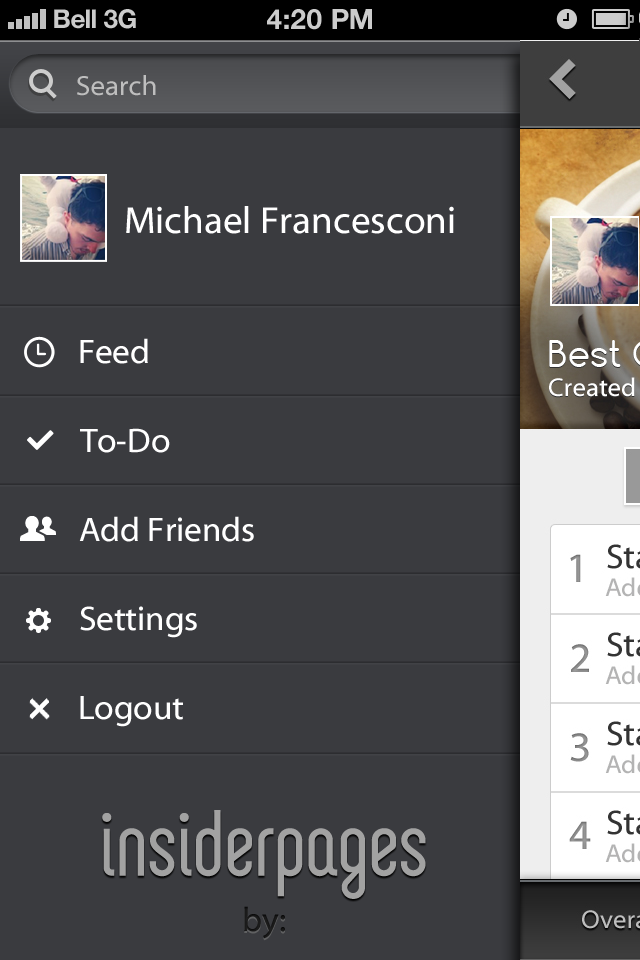
<style>
.page{position:relative;width:640px;height:960px;background:#3a3b3f}
.page>*{position:absolute;margin:0}
.t1{font:26px "HelveticaNeue-Bold";color:#cccccc}
.t2{font:26px "HelveticaNeue-Bold";color:#cccccc;text-transform:uppercase}
.t3{font:28px "HelveticaNeue-Bold";color:#cccccc;text-transform:uppercase}
.t4{font:28px "MyriadWebPro";color:#bebebe}
.t5{font:38px "MyriadWebPro";color:#ffffff}
.t6{font:34px "MyriadWebPro";color:#ffffff}
.t7{font:34px "MyriadWebPro";color:#1a1a1a}
</style>
<div class="page">
<p class="t1" style="left:54px;top:9px;width:42px;height:20px">Bell</p>
<p class="t2" style="left:104px;top:9px;width:32px;height:20px">3G</p>
<p class="t3" style="left:267px;top:9px;width:105px;height:21px">4:20 pM</p>
<p class="t4" style="left:77px;top:75px;width:79px;height:21px">Search</p>
<p class="t5" style="left:126px;top:206px;width:328px;height:28px">Michael Francesconi</p>
<p class="t6" style="left:80px;top:338px;width:68px;height:26px">Feed</p>
<p class="t6" style="left:80px;top:428px;width:90px;height:25px">To-Do</p>
<p class="t6" style="left:79px;top:516px;width:175px;height:26px">Add Friends</p>
<p class="t6" style="left:80px;top:606px;width:117px;height:32px">Settings</p>
<p class="t6" style="left:80px;top:696px;width:103px;height:31px">Logout</p>
<p class="t7" style="left:244px;top:906px;width:41px;height:33px">by:</p>
</div>
